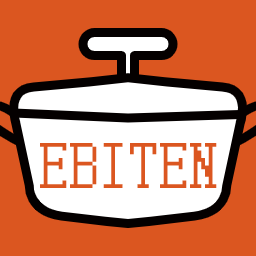
<style>
.page{position:relative;width:256px;height:256px;background:#db5620}
.page>*{position:absolute;margin:0}
.t1{font:60px "Fonsung16";color:#db5620}
</style>
<div class="page">
<p class="t1" style="left:40px;top:143px;width:177px;height:45px">EBITEN</p>
</div>
